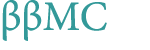
<style>
.page{position:relative;width:150px;height:50px;background:#ffffff}
.page>*{position:absolute;margin:0}
.t1{font:42px "MinionPro-Regular";color:#339999}
</style>
<div class="page">
<p class="t1" style="left:2px;top:0px;width:105px;height:41px">ββMC</p>
</div>
